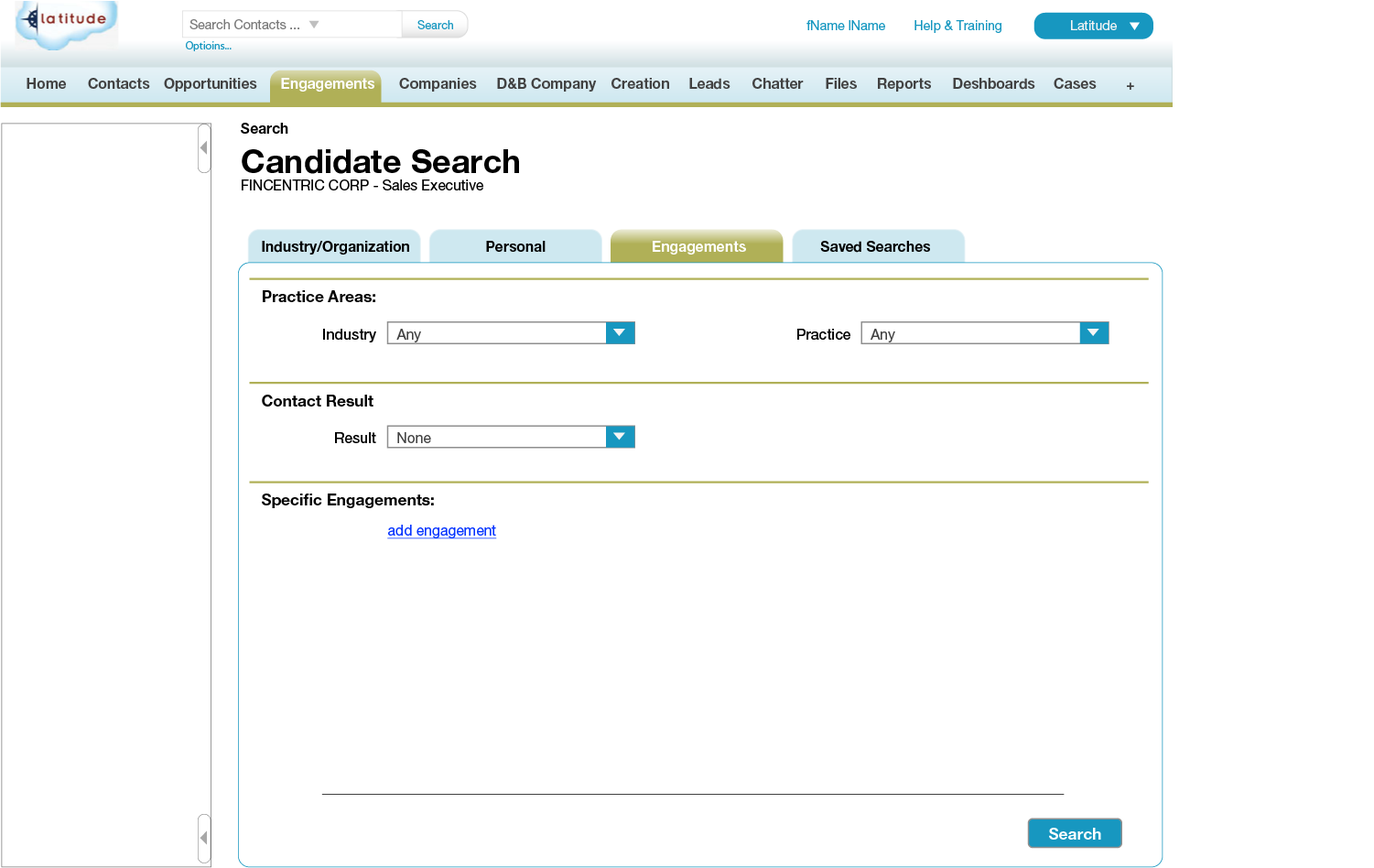
<style>
.page{position:relative;width:1374px;height:868px;background:#ffffff}
.page>*{position:absolute;margin:0}
.t1{font:12.9px "HelveticaNeue-Roman";color:#797979}
.t2{font:11.6px "HelveticaNeue-Roman";color:#1797c0}
.t3{font:12.9px "HelveticaNeue-Roman";color:#1797c0}
.t4{font:12.9px "HelveticaNeue-Roman";color:#f5f5f5}
.t5{font:11px "MyriadPro-Regular";color:#1797c0}
.t6{font:14.3px "HelveticaNeue-Bold";color:#424242}
.t7{font:14.3px "HelveticaNeue-Bold";color:#ffffff}
.t8{font:14.3px "HelveticaNeue-Roman";color:#000000}
.t9{font:14.3px "HelveticaNeue-Bold";color:#000000}
.t10{font:33px "HelveticaNeue-Bold";color:#000000}
.t11{font:15.8px "HelveticaNeue-Bold";color:#000000}
.t12{font:14.3px "HelveticaNeue-Medium";color:#000000}
.t13{font:14.3px "HelveticaNeue-Roman";color:#424242}
.t14{font:14.3px "HelveticaNeue-Roman";color:#0433ff;text-decoration:underline}
.t15{font:15.8px "HelveticaNeue-Bold";color:#ffffff}
</style>
<div class="page">
<p class="t1" style="left:189px;top:19px;width:110px;height:10px">Search Contacts ...</p>
<p class="t2" style="left:417px;top:20px;width:36px;height:9px">Search</p>
<p class="t3" style="left:806px;top:20px;width:195px;height:13px">fName lName        Help &amp; Training</p>
<p class="t4" style="left:1071px;top:20px;width:46px;height:10px">Latitude</p>
<p class="t5" style="left:186px;top:41px;width:46px;height:10px">Optioins...</p>
<p class="t6" style="left:27px;top:78px;width:39px;height:11px">Home</p>
<p class="t6" style="left:88px;top:78px;width:62px;height:11px">Contacts</p>
<p class="t6" style="left:164px;top:78px;width:93px;height:14px">Opportunities</p>
<p class="t7" style="left:281px;top:78px;width:93px;height:14px">Engagements</p>
<p class="t6" style="left:399px;top:78px;width:78px;height:14px">Companies</p>
<p class="t6" style="left:497px;top:78px;width:100px;height:14px">D&amp;B Company</p>
<p class="t6" style="left:612px;top:78px;width:57px;height:11px">Creation</p>
<p class="t6" style="left:689px;top:78px;width:42px;height:12px">Leads</p>
<p class="t6" style="left:752px;top:78px;width:52px;height:11px">Chatter</p>
<p class="t6" style="left:826px;top:78px;width:31px;height:11px">Files</p>
<p class="t6" style="left:878px;top:78px;width:53px;height:14px">Reports</p>
<p class="t6" style="left:953px;top:78px;width:82px;height:12px">Deshboards</p>
<p class="t6" style="left:1054px;top:78px;width:43px;height:11px">Cases</p>
<p class="t6" style="left:1127px;top:82px;width:7px;height:8px">+</p>
<p class="t8" style="left:241px;top:123px;width:278px;height:67px"><span class="t9">Search<br></span><span class="t10">Candidate Search<br></span>FINCENTRIC CORP - Sales Executive</p>
<p class="t9" style="left:262px;top:241px;width:147px;height:13px">Industry/Organization</p>
<p class="t9" style="left:486px;top:241px;width:60px;height:11px">Personal</p>
<p class="t7" style="left:653px;top:241px;width:93px;height:13px">Engagements</p>
<p class="t9" style="left:820px;top:241px;width:110px;height:12px">Saved Searches</p>
<p class="t11" style="left:263px;top:290px;width:112px;height:12px">Practice Areas:</p>
<p class="t12" style="left:323px;top:329px;width:53px;height:13px">Industry</p>
<p class="t13" style="left:396px;top:329px;width:25px;height:13px">Any</p>
<p class="t12" style="left:797px;top:329px;width:53px;height:11px">Practice</p>
<p class="t13" style="left:871px;top:329px;width:24px;height:13px">Any</p>
<p class="t11" style="left:262px;top:395px;width:111px;height:11px">Contact Result</p>
<p class="t12" style="left:335px;top:432px;width:41px;height:11px">Result</p>
<p class="t13" style="left:397px;top:432px;width:34px;height:11px">None</p>
<p class="t11" style="left:262px;top:493px;width:172px;height:15px">Speciﬁc Engagements:</p>
<p class="t14" style="left:387px;top:525px;width:110px;height:14px">add engagement</p>
<p class="t15" style="left:1049px;top:828px;width:52px;height:11px">Search</p>
</div>
